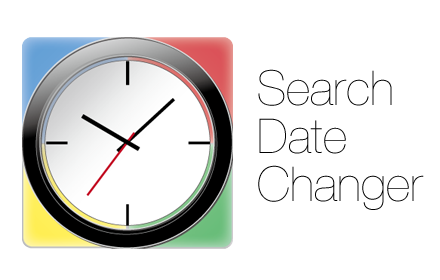
<style>
.page{position:relative;width:440px;height:280px;background:#ffffff}
.page>*{position:absolute;margin:0}
.t1{font:48px/48px "HelveticaNeue-UltraLight";color:#000000}
</style>
<div class="page">
<p class="t1" style="left:258px;top:69px;width:166px;height:141px">Search<br>Date<br>Changer</p>
</div>
